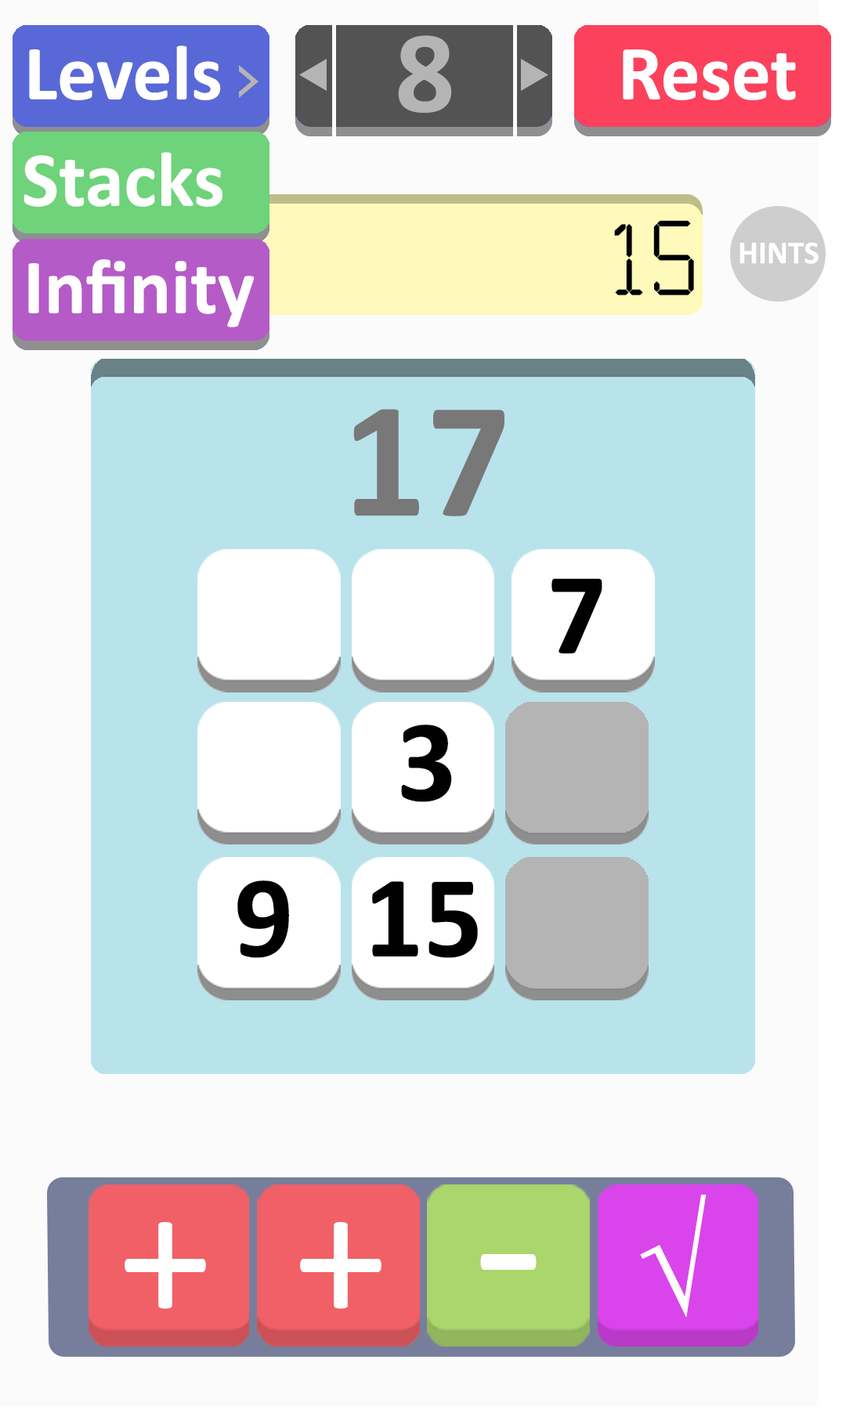
<style>
.page{position:relative;width:846px;height:1410px;background:#fbfbfb}
.page>*{position:absolute;margin:0}
.t1{font:117.6px "Calibri-Bold";color:#b4b4b4}
.t2{font:78.3px "Calibri-Bold";color:#ffffff}
.t3{font:117.5px "Calculator";color:#000000}
.t4{font:166.9px "Calibri-Bold";color:#787878}
.t5{font:117.6px "Calibri-Bold";color:#000000}
.t6{font:128.7px "TimesNewRomanPSMT";color:#ffffff}
.t7{font:188.3px "Calibri";color:#ffffff}
.t8{font:231.5px "Calibri";color:#ffffff}
</style>
<div class="page">
<p class="t1" style="left:398px;top:35px;width:54px;height:78px">8</p>
<p class="t2" style="left:29px;top:45px;width:192px;height:55px">Levels</p>
<p class="t2" style="left:623px;top:49px;width:173px;height:51px">Reset</p>
<p class="t2" style="left:23px;top:152px;width:199px;height:55px">Stacks</p>
<p class="t3" style="left:614px;top:220px;width:80px;height:75px">15</p>
<p class="t2" style="left:28px;top:259px;width:227px;height:68px">Infinity</p>
<p class="t4" style="left:353px;top:409px;width:151px;height:107px">17</p>
<p class="t5" style="left:551px;top:578px;width:51px;height:76px">7</p>
<p class="t5" style="left:401px;top:724px;width:51px;height:78px">3</p>
<p class="t5" style="left:237px;top:880px;width:52px;height:78px">9</p>
<p class="t5" style="left:372px;top:881px;width:106px;height:77px">15</p>
<p class="t6" style="left:640px;top:1194px;width:66px;height:123px">√</p>
<p class="t7" style="left:125px;top:1222px;width:81px;height:87px">+</p>
<p class="t7" style="left:300px;top:1222px;width:81px;height:87px">+</p>
<p class="t8" style="left:480px;top:1254px;width:56px;height:16px">-</p>
</div>
